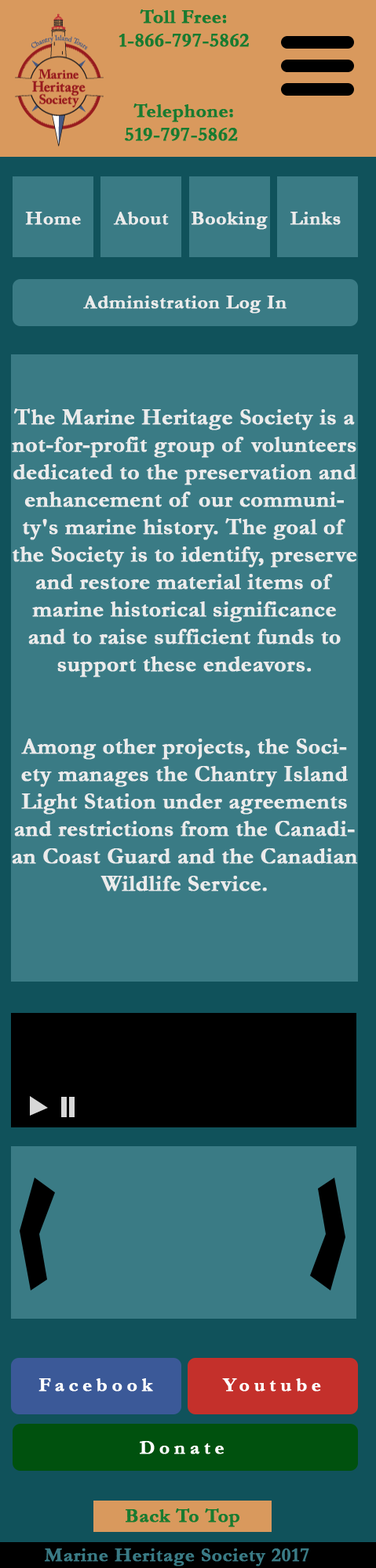
<style>
.page{position:relative;width:376px;height:1568px;background:#3a7b85}
.page>*{position:absolute;margin:0}
.t1{font:19.6px "Garamond-Bold";color:#197b30;font-weight:bold}
.t2{font:19.6px "Garamond-Bold";color:#ebebeb;font-weight:bold}
.t3{font:22.9px "Garamond-Bold";letter-spacing:-0.005em;color:#ebebeb;font-weight:bold}
.t4{font:19.6px "Garamond-Bold";letter-spacing:0.2em;color:#fefefe;font-weight:bold}
.t5{font:19.6px "Garamond-Bold";letter-spacing:0.2em;color:#ffffff;font-weight:bold}
.t6{font:19.6px "Garamond-Bold";color:#3a7b85;font-weight:bold}
</style>
<div class="page">
<p class="t1" style="left:118px;top:9px;width:131px;height:38px;text-align:center">Toll Free:<br>1-866-797-5862</p>
<p class="t1" style="left:125px;top:103px;width:113px;height:38px;text-align:center">Telephone:<br>519-797-5862</p>
<p class="t2" style="left:25px;top:212px;width:56px;height:13px">Home</p>
<p class="t2" style="left:113px;top:212px;width:56px;height:13px">About</p>
<p class="t2" style="left:191px;top:212px;width:76px;height:18px">Booking</p>
<p class="t2" style="left:289px;top:212px;width:51px;height:13px">Links</p>
<p class="t2" style="left:83px;top:296px;width:203px;height:18px">Administration Log In</p>
<p class="t3" style="left:12px;top:408px;width:346px;height:483px;text-align:center">The Marine Heritage Society is a not-for-profit group of volunteers dedicated to the preservation and enhancement of our community's marine history. The goal of the Society is to identify, preserve and restore material items of marine historical significance and to raise sufficient funds to support these endeavors.<br><br><br>Among other projects, the Society manages the Chantry Island Light Station under agreements and restrictions from the Canadian Coast Guard and the Canadian Wildlife Service.</p>
<p class="t4" style="left:38px;top:1378px;width:115px;height:14px">Facebook</p>
<p class="t5" style="left:222px;top:1378px;width:99px;height:14px">Youtube</p>
<p class="t5" style="left:140px;top:1441px;width:83px;height:13px">Donate</p>
<p class="t1" style="left:125px;top:1508px;width:114px;height:19px">Back To Top</p>
<p class="t6" style="left:45px;top:1548px;width:264px;height:18px">Marine Heritage Society 2017</p>
</div>
